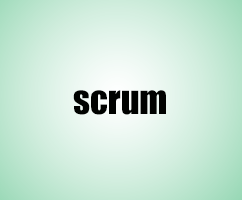
<style>
.page{position:relative;width:242px;height:200px}
.page>*{position:absolute;margin:0}
.t1{font:36px "Impact";color:#000200}
</style>
<div class="page">
<p class="t1" style="left:73px;top:90px;width:93px;height:25px">scrum</p>
</div>
